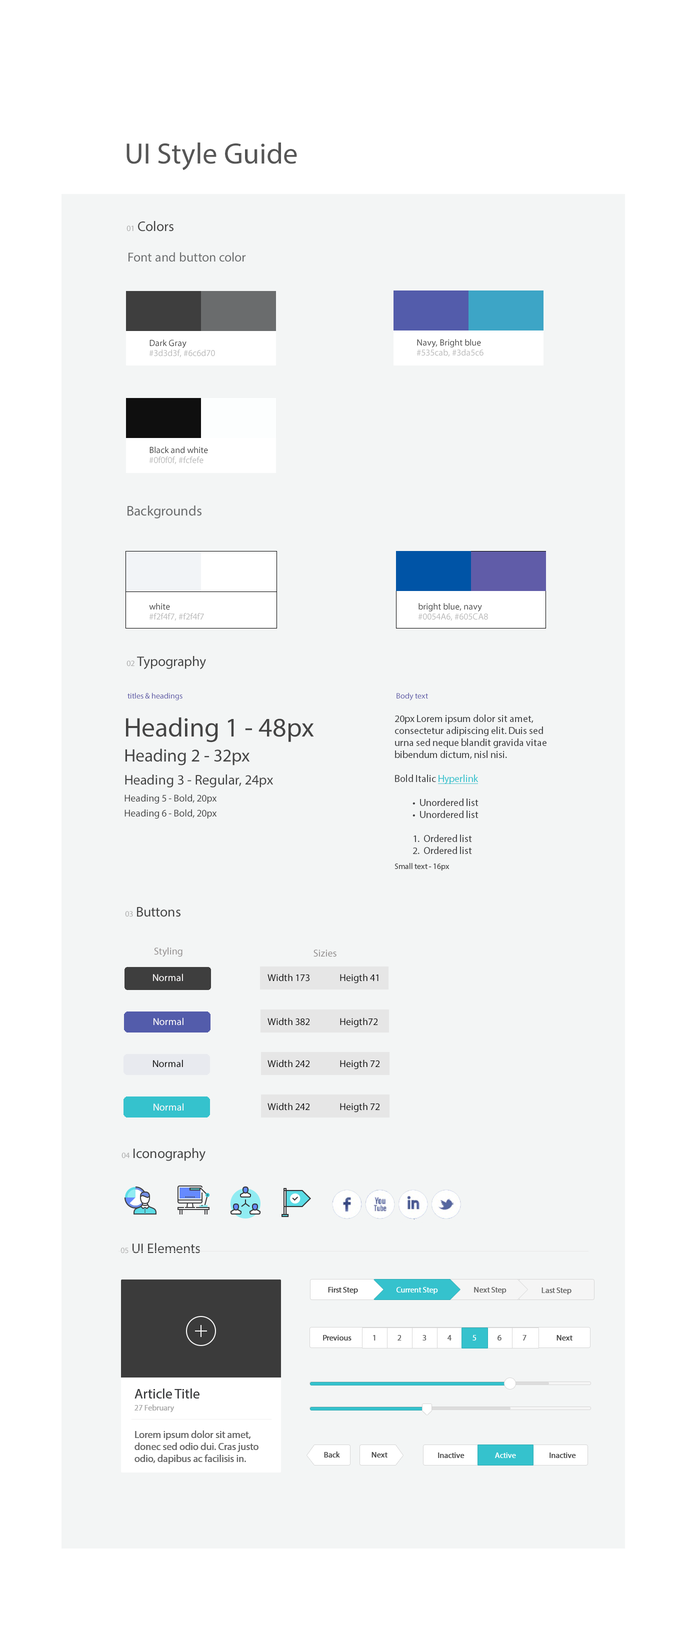
<style>
.page{position:relative;width:700px;height:1630px;background:#f3f5f5}
.page>*{position:absolute;margin:0}
.t1{font:29.5px "MyriadPro-Regular";color:#555555}
.t2{font:14px "MyriadPro-Regular";color:#444444}
.t3{font:8px "MyriadPro-Regular";color:#aaaaaa}
.t4{font:13px "MyriadPro-Regular";color:#6a6c6d}
.t5{font:9px/10px "MyriadPro-Regular";color:#bbbbbb}
.t6{font:9px "MyriadPro-Regular";color:#444444}
.t7{font:14px "MyriadPro-Regular";color:#6a6c6d}
.t8{font:8px "MyriadPro-Regular";color:#605ca8}
.t9{font:14px/23px "MyriadPro-Regular";color:#444444}
.t10{font:27px/25px "MyriadPro-Regular";color:#444444}
.t11{font:18px/25px "MyriadPro-Regular";color:#444444}
.t12{font:10px/17px "MyriadPro-Regular";color:#444444}
.t13{font:10px/15px "MyriadPro-Regular";color:#444444}
.t14{font:10px/12px "MyriadPro-Regular";color:#3d3d3f}
.t15{font:10px/12px "MyriadPro-Regular";color:#35c2cd;text-decoration:underline}
.t16{font:8px/15px "MyriadPro-Regular";color:#444444}
.t17{font:10px "MyriadPro-Regular";color:#918d8d}
.t18{font:10px "MyriadPro-Regular";color:#fefcfc}
.t19{font:10px "MyriadPro-Regular";color:#090909}
.t20{font:8px "MyriadPro-Regular";color:#444444}
.t21{font:8px "MyriadPro-Regular";color:#ffffff}
.t22{font:8px "MyriadPro-Regular";color:#666666}
.t23{font:14px/11px "MyriadPro-Regular";color:#393a3c}
.t24{font:8px/12px "MyriadPro-Regular";color:#aaaaaa}
.t25{font:10px/12px "MyriadPro-Regular";color:#666666}
.t26{font:8px "MyriadPro-Regular";color:#454545}
</style>
<div class="page">
<p class="t1" style="left:126px;top:142px;width:171px;height:28px">UI Style Guide</p>
<p class="t2" style="left:126px;top:221px;width:48px;height:11px"><span class="t3">01</span> Colors</p>
<p class="t4" style="left:128px;top:252px;width:118px;height:10px">Font and button color</p>
<p class="t5" style="left:149px;top:340px;width:66px;height:18px"><span class="t6">Dark Gray<br></span>#3d3d3f, #6c6d70</p>
<p class="t6" style="left:416px;top:339px;width:68px;height:18px">Navy, Bright blue<br><span class="t5">#535cab, #3da5c6</span></p>
<p class="t5" style="left:149px;top:446px;width:59px;height:18px"><span class="t6">Black and white<br></span>#0f0f0f, #fcfefe</p>
<p class="t7" style="left:128px;top:506px;width:74px;height:12px">Backgrounds</p>
<p class="t5" style="left:149px;top:603px;width:55px;height:18px"><span class="t6">white<br></span>#f2f4f7, #f2f4f7</p>
<p class="t6" style="left:418px;top:603px;width:70px;height:18px">bright blue, navy<br><span class="t5">#0054A6, #605CA8</span></p>
<p class="t2" style="left:126px;top:656px;width:80px;height:14px"><span class="t3">02</span> Typography</p>
<p class="t8" style="left:128px;top:692px;width:54px;height:8px">titles &amp; headings</p>
<p class="t8" style="left:396px;top:692px;width:32px;height:8px">Body text</p>
<p class="t9" style="left:124px;top:717px;width:190px;height:102px"><span class="t10">Heading 1 - 48px<br></span><span class="t11">Heading 2 - 32px<br></span>Heading 3 - Regular, 24px<br><span class="t12">Heading 5 - Bold, 20px<br></span><span class="t13">Heading 6 - Bold, 20px</span></p>
<p class="t14" style="left:394px;top:714px;width:152px;height:156px">20px Lorem ipsum dolor sit amet, consectetur adipiscing elit. Duis sed urna sed neque blandit gravida vitae bibendum dictum, nisl nisi.<br><br>Bold Italic <span class="t15">Hyperlink <br><br></span> •  Unordered list<br> •  Unordered list<br><br> 1.  Ordered list<br> 2.  Ordered list<br><span class="t16">Small text - 16px</span></p>
<p class="t2" style="left:125px;top:907px;width:55px;height:10px"><span class="t3">03</span> Buttons</p>
<p class="t17" style="left:154px;top:947px;width:28px;height:10px">Styling</p>
<p class="t17" style="left:314px;top:950px;width:22px;height:7px">Sizies</p>
<p class="t18" style="left:153px;top:974px;width:30px;height:8px">Normal</p>
<p class="t19" style="left:268px;top:974px;width:110px;height:10px">Width 173  Heigth 41</p>
<p class="t18" style="left:154px;top:1018px;width:30px;height:8px">Normal</p>
<p class="t19" style="left:268px;top:1018px;width:110px;height:10px">Width 382  Heigth72</p>
<p class="t19" style="left:153px;top:1060px;width:30px;height:8px">Normal</p>
<p class="t19" style="left:268px;top:1060px;width:112px;height:10px">Width 242  Heigth 72</p>
<p class="t18" style="left:154px;top:1103px;width:30px;height:8px">Normal</p>
<p class="t19" style="left:268px;top:1102px;width:112px;height:10px">Width 242  Heigth 72</p>
<p class="t2" style="left:122px;top:1148px;width:84px;height:14px"><span class="t3">04</span> Iconography</p>
<p class="t2" style="left:120px;top:1243px;width:80px;height:11px"><span class="t3">05</span> UI Elements</p>
<p class="t20" style="left:328px;top:1287px;width:30px;height:7px">First Step</p>
<p class="t21" style="left:396px;top:1287px;width:42px;height:7px">Current Step</p>
<p class="t22" style="left:474px;top:1287px;width:32px;height:7px">Next Step</p>
<p class="t22" style="left:542px;top:1288px;width:30px;height:6px">Last Step</p>
<p class="t20" style="left:323px;top:1335px;width:29px;height:5px">Previous</p>
<p class="t22" style="left:373px;top:1335px;width:3px;height:5px">1</p>
<p class="t22" style="left:398px;top:1335px;width:4px;height:5px">2</p>
<p class="t22" style="left:422px;top:1335px;width:4px;height:5px">3</p>
<p class="t22" style="left:448px;top:1335px;width:4px;height:5px">4</p>
<p class="t21" style="left:472px;top:1335px;width:4px;height:5px">5</p>
<p class="t22" style="left:498px;top:1335px;width:4px;height:5px">6</p>
<p class="t22" style="left:522px;top:1335px;width:4px;height:5px">7</p>
<p class="t20" style="left:556px;top:1335px;width:16px;height:5px">Next</p>
<p class="t23" style="left:134px;top:1388px;width:66px;height:24px">Article Title<br><span class="t24">27 February</span></p>
<p class="t25" style="left:134px;top:1430px;width:124px;height:34px">Lorem ipsum dolor sit amet, donec sed odio dui. Cras justo odio, dapibus ac facilisis in. Egestas eget quam.</p>
<p class="t26" style="left:324px;top:1452px;width:16px;height:6px">Back</p>
<p class="t26" style="left:372px;top:1452px;width:16px;height:6px">Next</p>
<p class="t26" style="left:438px;top:1452px;width:26px;height:6px">Inactive</p>
<p class="t21" style="left:495px;top:1452px;width:21px;height:6px">Active</p>
<p class="t26" style="left:550px;top:1452px;width:26px;height:6px">Inactive</p>
</div>
